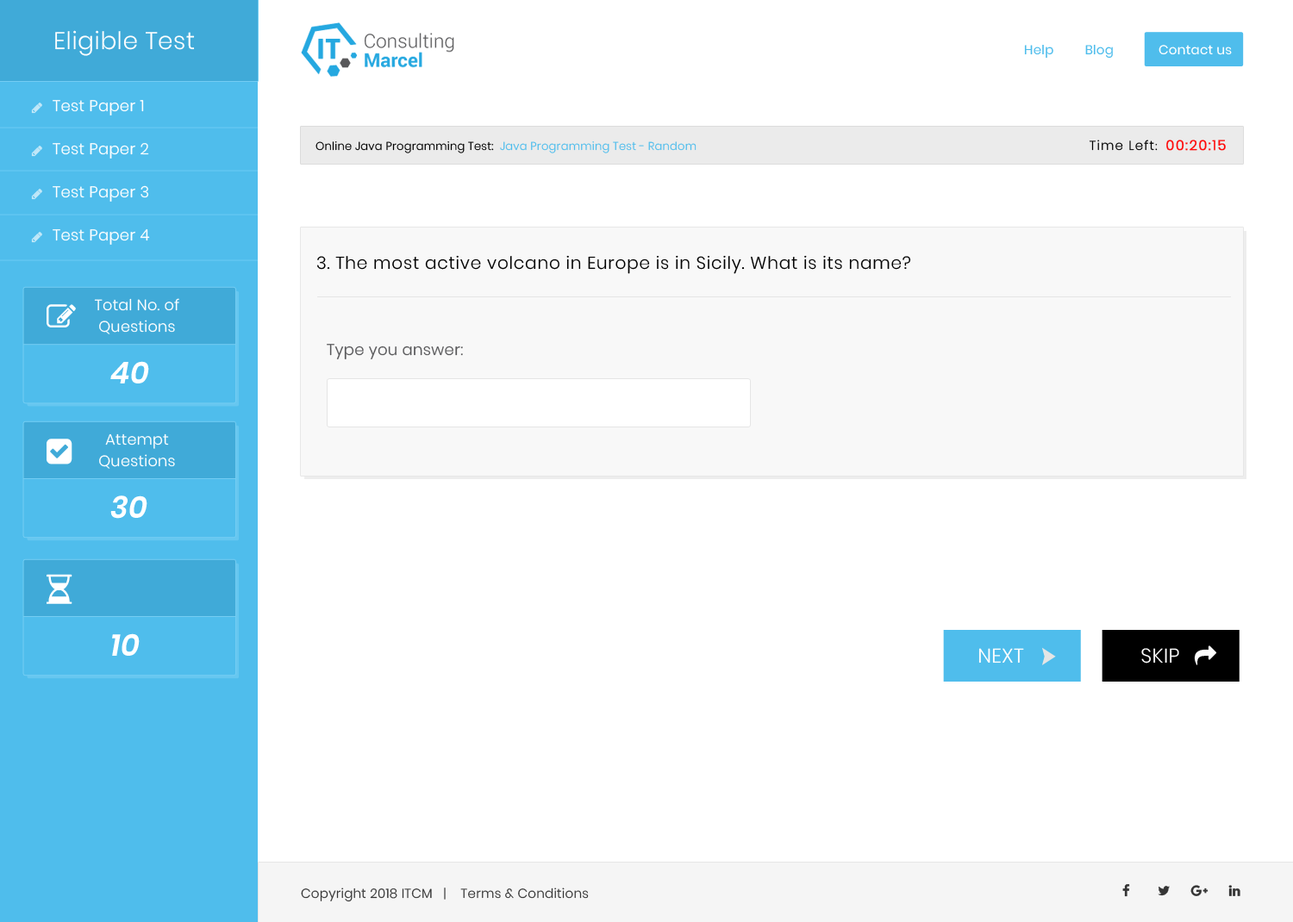
<style>
.page{position:relative;width:1293px;height:922px;background:#ffffff}
.page>*{position:absolute;margin:0}
.t1{font:24.1px "Poppins-Light";letter-spacing:0.02em;color:#ffffff}
.t2{font:12.9px "Poppins-Regular";letter-spacing:0.02em;color:#4fbdec}
.t3{font:12.9px "Poppins-Regular";letter-spacing:0.02em;color:#ffffff}
.t4{font:15.5px/21.5px "Poppins-Light";letter-spacing:0.02em;color:#ffffff}
.t5{font:11.2px "Poppins-Light";letter-spacing:0.02em;color:#4fbdec}
.t6{font:11.2px "Poppins-Light";letter-spacing:0.02em;color:#000000}
.t7{font:12.9px "Poppins-Light";letter-spacing:0.08em;color:#000000}
.t8{font:11.2px "Poppins-Light";letter-spacing:0.08em;color:#000000}
.t9{font:13.8px "Poppins-Light";letter-spacing:0.08em;color:#ff0a0a;font-weight:bold}
.t10{font:17.2px "Poppins-Light";letter-spacing:0.04em;color:#000000}
.t11{font:15.1px/21px "Poppins-Light";letter-spacing:0.02em;color:#ffffff}
.t12{font:15.5px "Poppins-Light";letter-spacing:0.02em;color:#58585a}
.t13{font:30.2px "Poppins-SemiBold";letter-spacing:0.02em;color:#ffffff;font-style:italic}
.t14{font:20px "Poppins-Light";letter-spacing:0.02em;color:#fefefe;text-transform:uppercase}
.t15{font:12.9px "Poppins-Light";letter-spacing:0.02em;color:#353535}
</style>
<div class="page">
<p class="t1" style="left:55px;top:30px;width:140px;height:26px">Eligible Test</p>
<p class="t2" style="left:1024px;top:44px;width:89px;height:15px">Help         Blog</p>
<p class="t3" style="left:1158px;top:45px;width:74px;height:10px">Contact us</p>
<p class="t4" style="left:53px;top:100px;width:97px;height:145px">Test Paper 1<br><br>Test Paper 2<br><br>Test Paper 3<br><br>Test Paper 4</p>
<p class="t5" style="left:315px;top:141px;width:381px;height:12px"><span class="t6">Online Java Programming Test:  </span>Java Programming Test - Random</p>
<p class="t7" style="left:1089px;top:140px;width:137px;height:11px">Time Left<span class="t8">:  </span><span class="t9">00:20:15</span></p>
<p class="t10" style="left:317px;top:255px;width:594px;height:19px">3. The most active volcano in Europe is in Sicily. What is its name?</p>
<p class="t11" style="left:94px;top:298px;width:85px;height:36px;text-align:center">Total No. of<br>Questions</p>
<p class="t12" style="left:327px;top:344px;width:136px;height:15px">Type you answer:</p>
<p class="t13" style="left:110px;top:361px;width:39px;height:23px">40</p>
<p class="t11" style="left:99px;top:434px;width:76px;height:35px;text-align:center">Attempt<br>Questions</p>
<p class="t13" style="left:110px;top:496px;width:37px;height:23px">30</p>
<p class="t13" style="left:112px;top:634px;width:28px;height:22px">10</p>
<p class="t14" style="left:978px;top:648px;width:46px;height:16px">Next</p>
<p class="t14" style="left:1141px;top:648px;width:38px;height:16px">Skip</p>
<p class="t15" style="left:301px;top:888px;width:288px;height:14px">Copyright 2018 ITCM   |    Terms &amp; Conditions</p>
</div>
